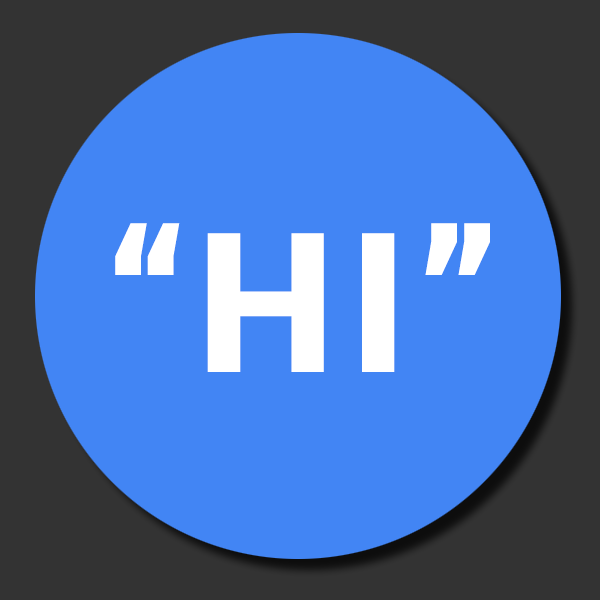
<style>
.page{position:relative;width:600px;height:600px;background:#4285f4}
.page>*{position:absolute;margin:0}
.t1{font:195.3px "Roboto-Black";letter-spacing:0.075em;color:#ffffff}
</style>
<div class="page">
<p class="t1" style="left:115px;top:223px;width:375px;height:149px">“HI”</p>
</div>
